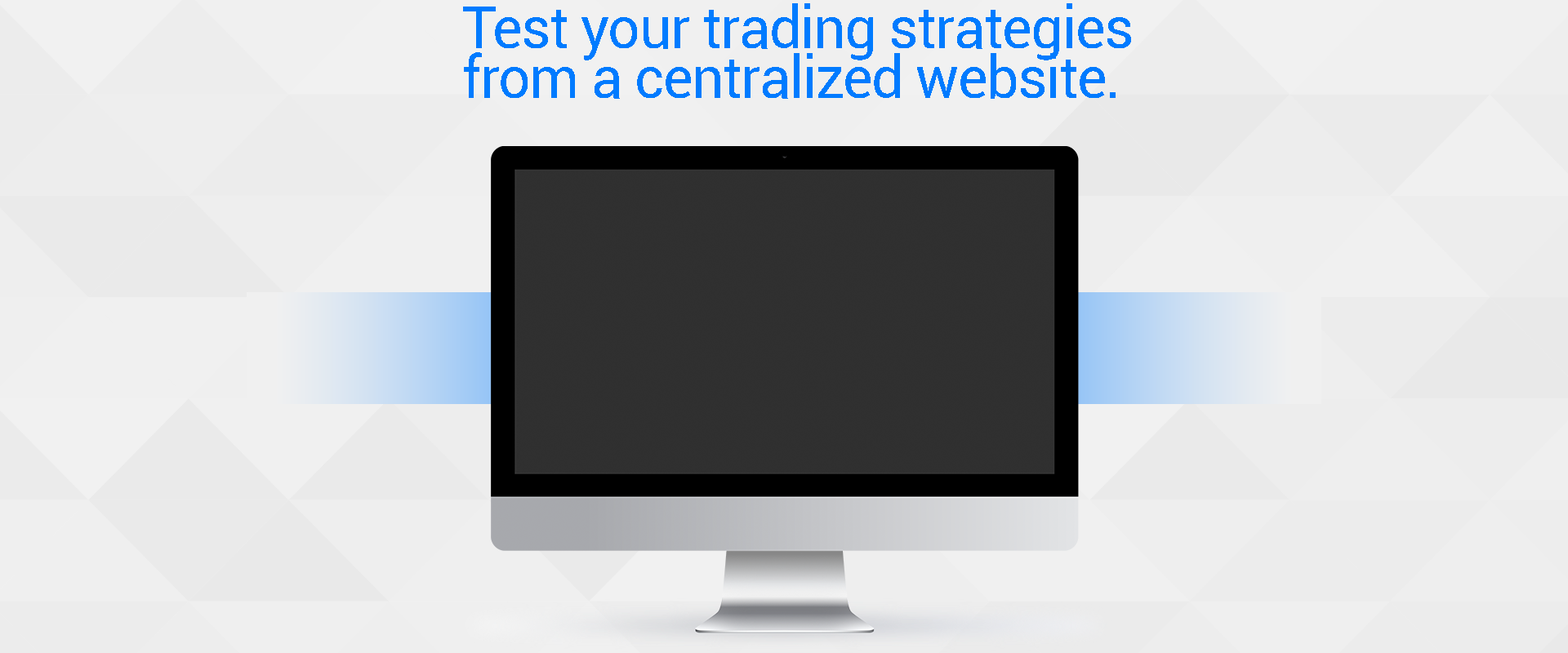
<style>
.page{position:relative;width:1568px;height:653px}
.page>*{position:absolute;margin:0}
.t1{font:58.2px/49.2px "Roboto-Regular";letter-spacing:-0.02em;color:#007bff}
</style>
<div class="page">
<p class="t1" style="left:463px;top:3px;width:668px;height:96px">Test your trading strategies<br>from a centralized website.</p>
</div>
